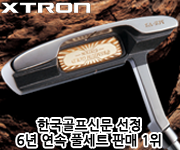
<style>
.page{position:relative;width:180px;height:150px;background:#000000}
.page>*{position:absolute;margin:0}
.t1{font:13px "NanumGothic";color:#000000;font-weight:bold}
</style>
<div class="page">
<p class="t1" style="left:17px;top:118px;width:144px;height:29px;text-align:center">한국골프신문 선정<br>6년 연속 풀세트 판매 1위</p>
</div>
